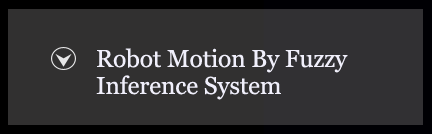
<style>
.page{position:relative;width:432px;height:134px;background:#313030}
.page>*{position:absolute;margin:0}
.t1{font:24.5px/9px "Georgia";letter-spacing:-0.005em;color:#f0effb}
</style>
<div class="page">
<p class="t1" style="left:96px;top:48px;width:252px;height:52px">Robot Motion By Fuzzy <br><br><br>Inference System</p>
</div>
